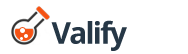
<style>
.page{position:relative;width:188px;height:54px;background:#ffffff}
.page>*{position:absolute;margin:0}
.t1{font:30px "OpenSans-Bold";letter-spacing:-0.06em;color:#263746}
</style>
<div class="page">
<p class="t1" style="left:51px;top:20px;width:76px;height:31px">Valify</p>
</div>
